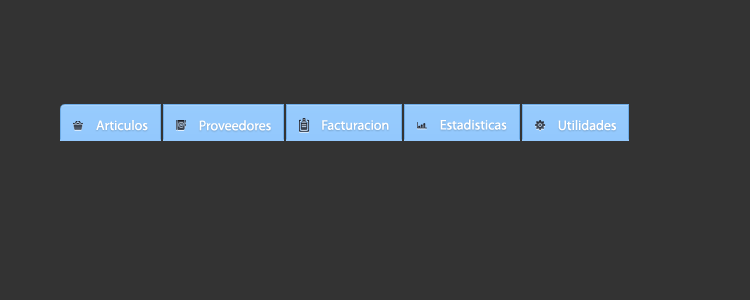
<style>
.page{position:relative;width:750px;height:300px;background:#333333}
.page>*{position:absolute;margin:0}
.t1{font:14px "MyriadPro-Regular";color:#ffffff}
</style>
<div class="page">
<p class="t1" style="left:96px;top:120px;width:52px;height:11px">Articulos</p>
<p class="t1" style="left:199px;top:120px;width:72px;height:11px">Proveedores</p>
<p class="t1" style="left:322px;top:120px;width:67px;height:10px">Facturacion</p>
<p class="t1" style="left:440px;top:119px;width:67px;height:11px">Estadisticas</p>
<p class="t1" style="left:558px;top:120px;width:58px;height:11px">Utilidades</p>
</div>
